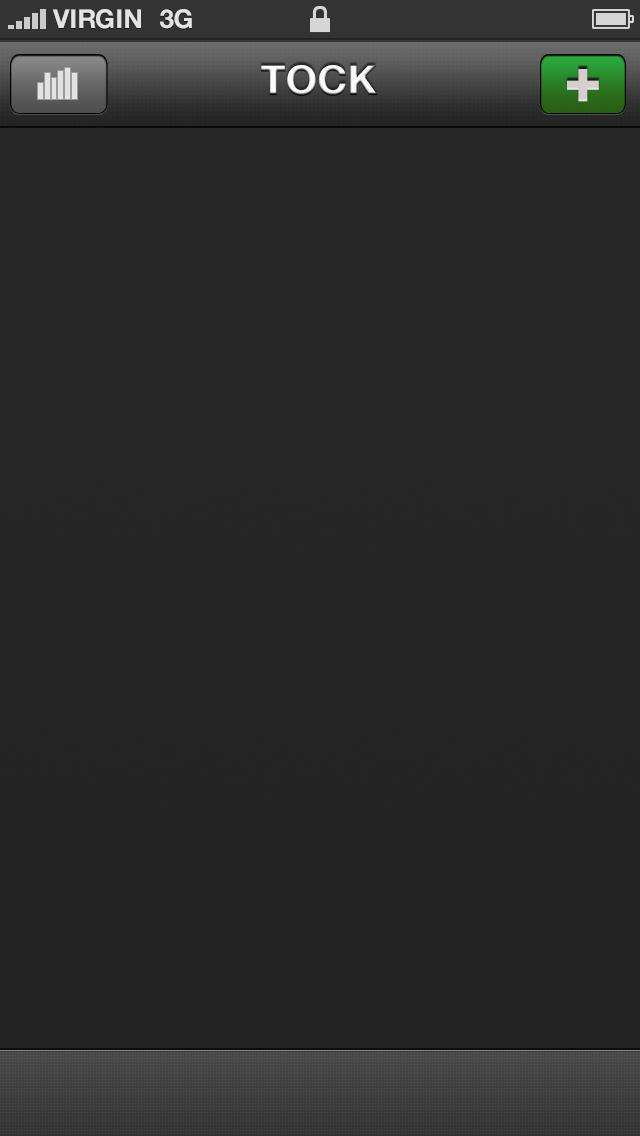
<style>
.page{position:relative;width:640px;height:1136px}
.page>*{position:absolute;margin:0}
.t1{font:26px "HelveticaNeue-Bold";color:#e4e4e4;text-transform:uppercase}
.t2{font:40.8px "HelveticaNeue-Bold";color:#fcfcfc}
.t3{font:63.4px "HelveticaNeue-CondensedBlack";color:#d7cece}
</style>
<div class="page">
<p class="t1" style="left:52px;top:9px;width:89px;height:20px">VIRGIN</p>
<p class="t1" style="left:160px;top:9px;width:32px;height:20px">3G</p>
<p class="t2" style="left:261px;top:65px;width:117px;height:31px">TOCK</p>
<p class="t3" style="left:567px;top:69px;width:32px;height:33px">+</p>
</div>
